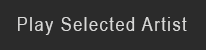
<style>
.page{position:relative;width:206px;height:50px;background:#2b2b2b}
.page>*{position:absolute;margin:0}
.t1{font:20px "ArialNarrow";letter-spacing:0.075em;color:#d9d9d8}
</style>
<div class="page">
<p class="t1" style="left:18px;top:17px;width:169px;height:18px">Play Selected Artist</p>
</div>
